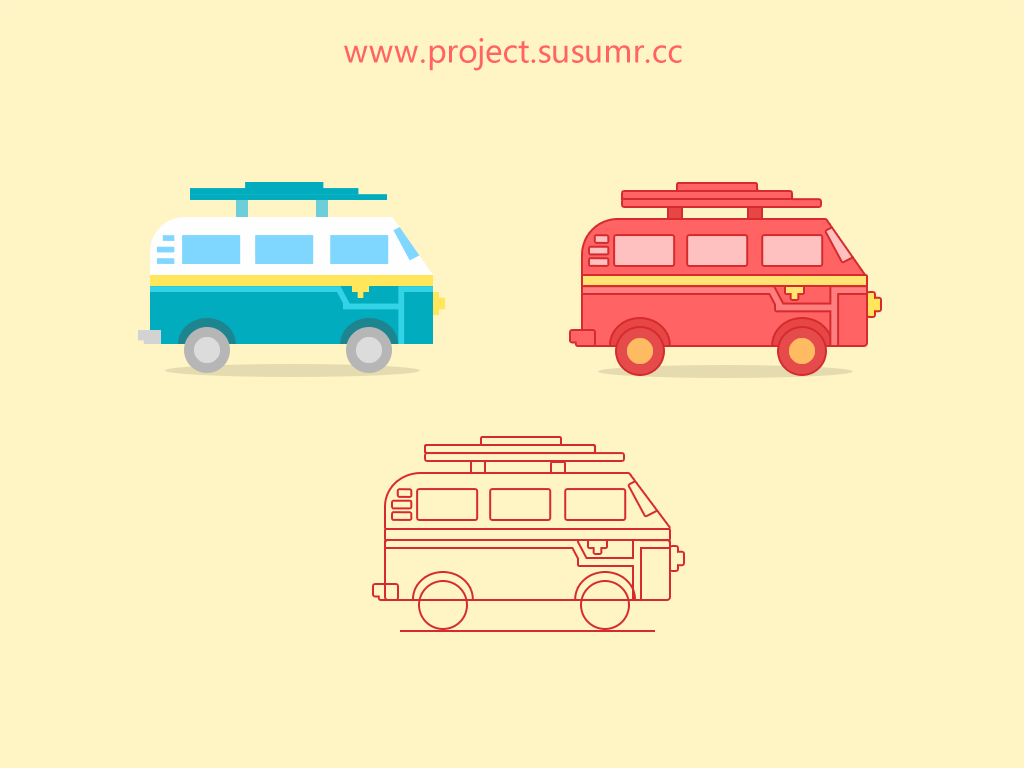
<style>
.page{position:relative;width:1024px;height:768px;background:#fff4c4}
.page>*{position:absolute;margin:0}
.t1{font:31px "MicrosoftYaHei";color:#ff6363}
</style>
<div class="page">
<p class="t1" style="left:344px;top:38px;width:338px;height:33px">www.project.susumr.cc</p>
</div>
